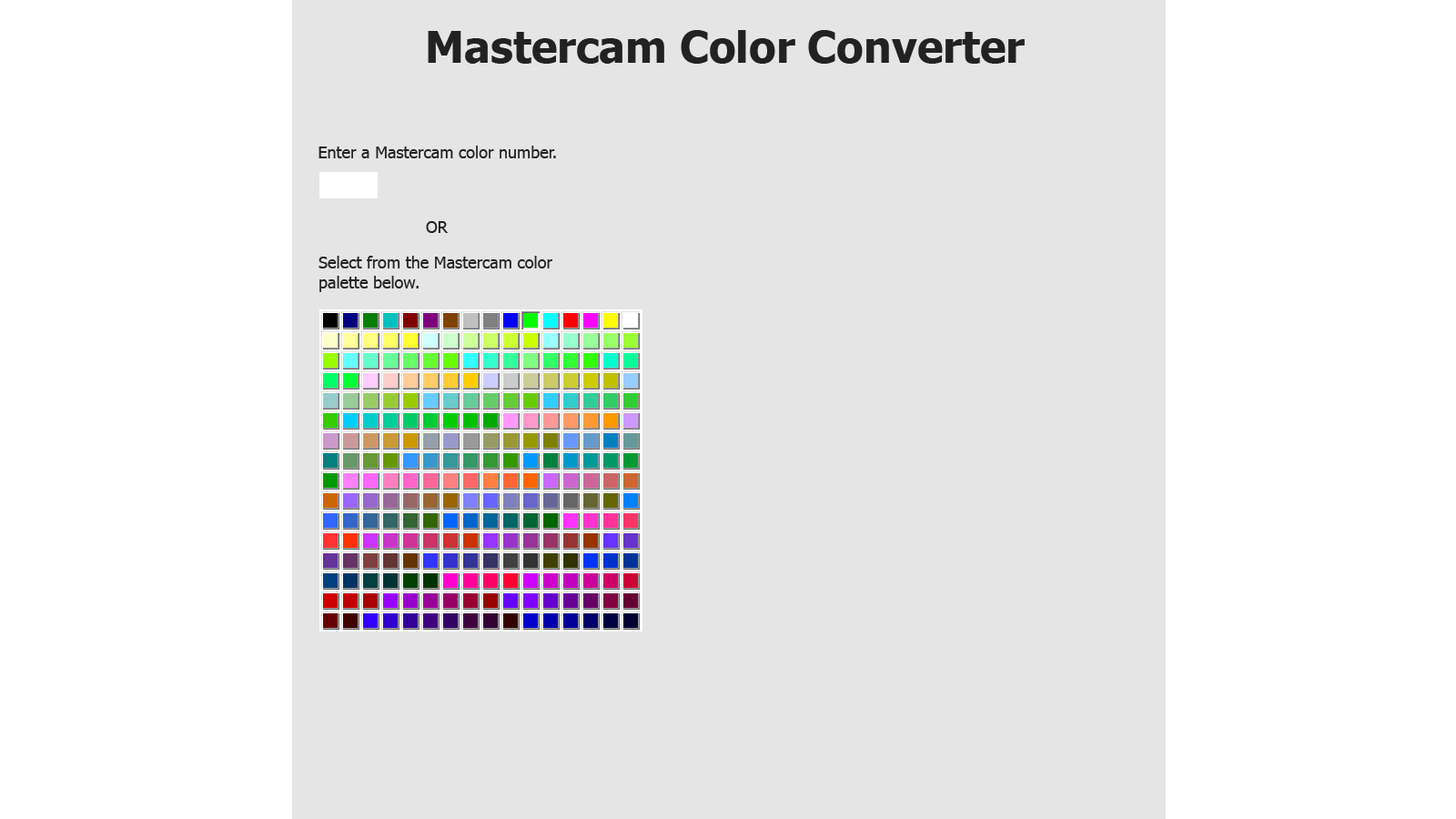
<style>
.page{position:relative;width:1456px;height:819px;background:#e5e5e5}
.page>*{position:absolute;margin:0}
.t1{font:43.7px "Tahoma-Bold";color:#222222}
.t2{font:16.4px "Tahoma";color:#222222}
.t3{font:16.4px/20px "Tahoma";color:#222222}
</style>
<div class="page">
<p class="t1" style="left:428px;top:30px;width:597px;height:34px">Mastercam Color Converter</p>
<p class="t2" style="left:318px;top:146px;width:238px;height:12px">Enter a Mastercam color number.</p>
<p class="t2" style="left:426px;top:221px;width:23px;height:12px">OR</p>
<p class="t3" style="left:318px;top:256px;width:234px;height:36px">Select from the Mastercam color palette below.</p>
</div>
